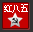
<style>
.page{position:relative;width:33px;height:32px;background:#c50000}
.page>*{position:absolute;margin:0}
.t1{font:10.4px "SimSun";letter-spacing:-0.25em;color:#ffffff}
</style>
<div class="page">
<p class="t1" style="left:4px;top:4px;width:24px;height:9px">红八五</p>
</div>
